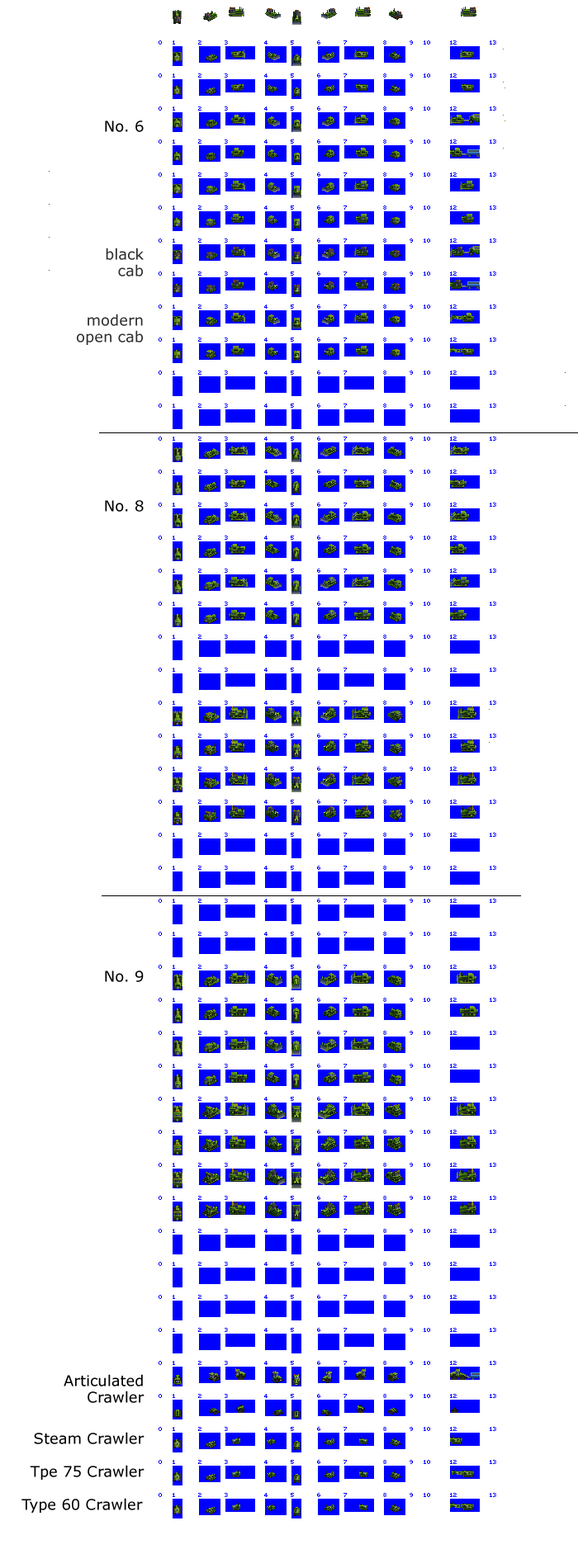
<style>
.page{position:relative;width:578px;height:1568px;background:#ffffff}
.page>*{position:absolute;margin:0}
.t1{font:14.9px/8.3px "Verdana";color:#000000}
.t2{font:14.9px/8.3px "Verdana";color:#303030}
</style>
<div class="page">
<p class="t1" style="left:21px;top:120px;width:123px;height:1393px;text-align:right">No. 6<br><br><br><br><br><br><br><br><br><br><br><br><br><br><br><br><br><br><br><br><br><br><br><br><br><br><br><br><br><br><br><br><br><br><br><br><br><br><br><br><br><br><br><br><br><br>No. 8<br><br><br><br><br><br><br><br><br><br><br><br><br><br><br><br><br><br><br><br><br><br><br><br><br><br><br><br><br><br><br><br><br><br><br><br><br><br><br><br><br><br><br><br><br><br><br><br><br><br><br><br><br><br><br><br><br>No. 9<br><br><br><br><br><br><br><br><br><br><br><br><br><br><br><br><br><br><br><br><br><br><br><br><br><br><br><br><br><br><br><br><br><br><br><br><br><br><br><br><br><br><br><br><br><br><br><br><br>Articulated<br><br>Crawler<br><br><br><br><br>Steam Crawler<br><br><br><br>Tpe 75 Crawler<br><br><br><br>Type 60 Crawler</p>
<p class="t2" style="left:77px;top:248px;width:67px;height:97px;text-align:right">black<br><br>cab<br><br><br><br><br><br>modern<br><br>open cab</p>
</div>
